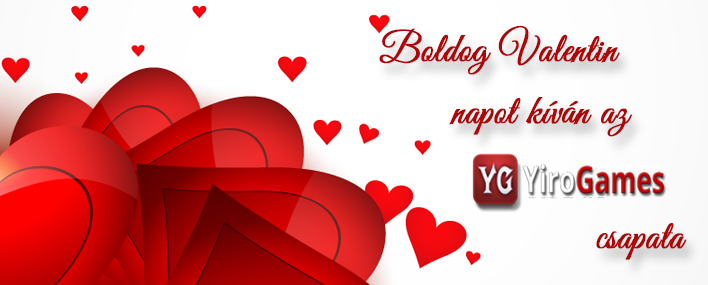
<style>
.page{position:relative;width:708px;height:285px}
.page>*{position:absolute;margin:0}
.t1{font:41.6px "GreatVibes-Regular";color:#af0506;font-weight:bold;scale:0.92 1}
</style>
<div class="page">
<p class="t1" style="left:379px;top:25px;width:308px;height:235px">Boldog Valentin<br>   napot kíván az<br><br>      csapata</p>
</div>
